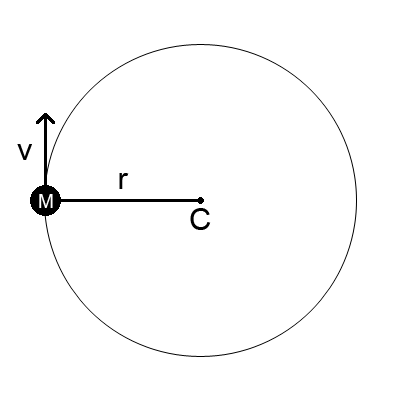
<style>
.page{position:relative;width:400px;height:400px;background:#ffffff}
.page>*{position:absolute;margin:0}
.t1{font:31px "ArialMT";color:#000000}
.t2{font:19px "ArialMT";color:#ffffff}
</style>
<div class="page">
<p class="t1" style="left:17px;top:144px;width:15px;height:16px">v</p>
<p class="t1" style="left:119px;top:173px;width:10px;height:16px">r</p>
<p class="t2" style="left:39px;top:194px;width:14px;height:14px">M</p>
<p class="t1" style="left:190px;top:208px;width:21px;height:22px">C</p>
</div>
